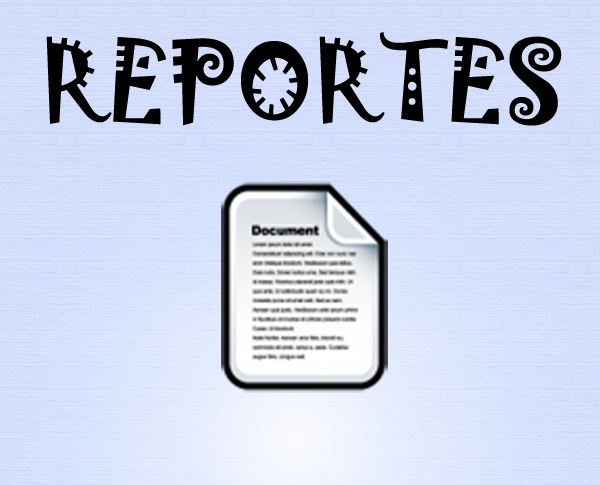
<style>
.page{position:relative;width:600px;height:485px}
.page>*{position:absolute;margin:0}
.t1{font:100px "Jokerman-Regular";color:#000001}
</style>
<div class="page">
<p class="t1" style="left:46px;top:32px;width:516px;height:94px">REPORTES</p>
</div>
